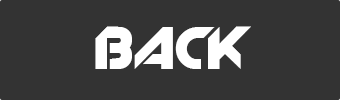
<style>
.page{position:relative;width:340px;height:100px;background:#333333}
.page>*{position:absolute;margin:0}
.t1{font:80px "Slant";color:#ffffff}
</style>
<div class="page">
<p class="t1" style="left:95px;top:26px;width:156px;height:43px">back</p>
</div>
